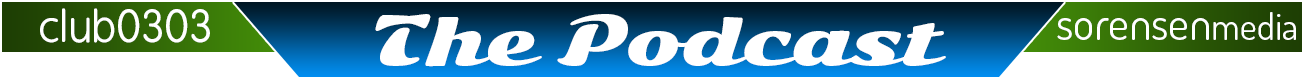
<style>
.page{position:relative;width:1304px;height:79px;background:#ffffff}
.page>*{position:absolute;margin:0}
.t1{font:43px "BPreplay";color:#ffffff}
.t2{font:66px "SonsieOne";color:#ffffff}
.t3{font:45px "Dosis-Regular";color:#ffffff}
.t4{font:37px "Dosis-Regular";color:#ffffff}
</style>
<div class="page">
<p class="t1" style="left:40px;top:8px;width:170px;height:35px">club0303</p>
<p class="t2" style="left:375px;top:14px;width:571px;height:53px">The Podcast</p>
<p class="t3" style="left:1057px;top:12px;width:239px;height:28px">sorensen<span class="t4">media</span></p>
</div>
